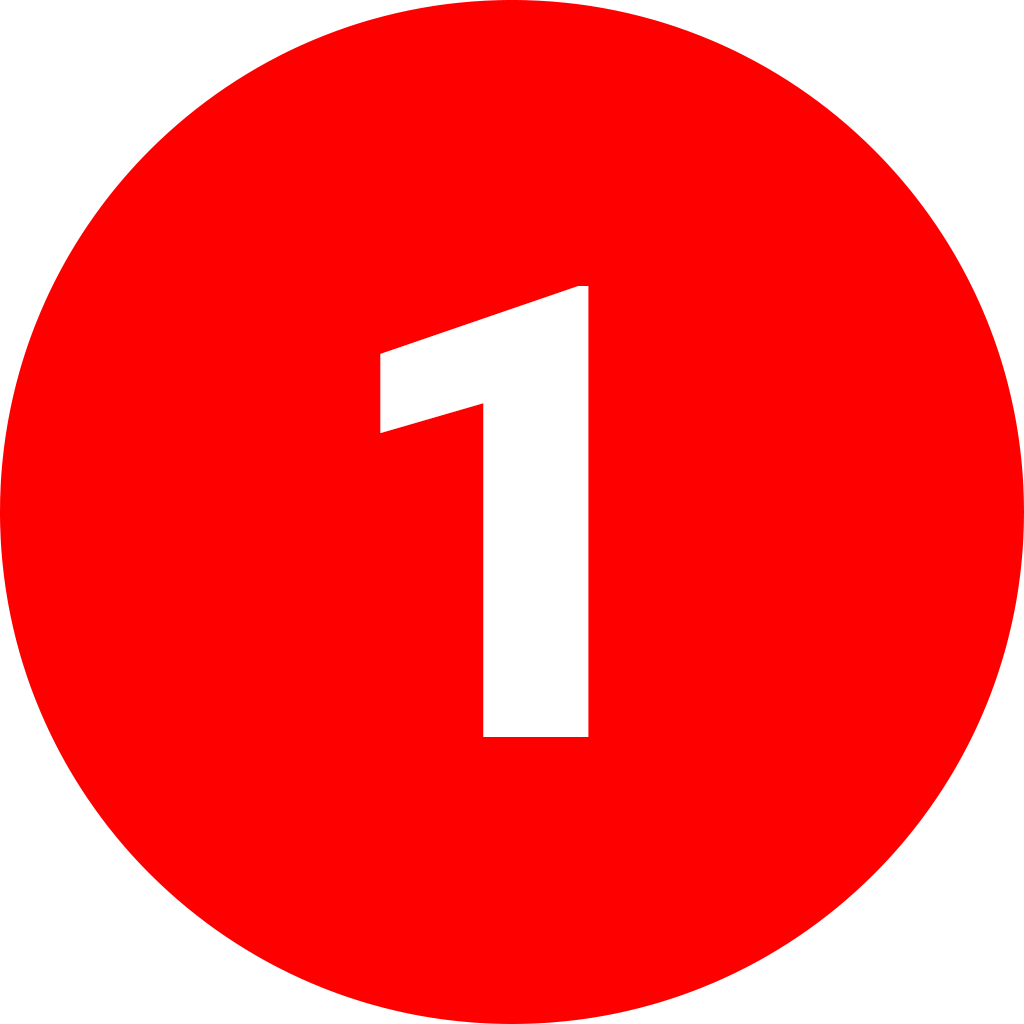
<style>
.page{position:relative;width:1024px;height:1024px;background:#ff0000}
.page>*{position:absolute;margin:0}
.t1{font:635px "Roboto-Black";color:#ffffff}
</style>
<div class="page">
<p class="t1" style="left:380px;top:286px;width:209px;height:451px">1</p>
</div>
